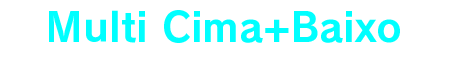
<style>
.page{position:relative;width:450px;height:60px;background:#ffffff}
.page>*{position:absolute;margin:0}
.t1{font:40px "RodinPro-B";color:#00ffff}
</style>
<div class="page">
<p class="t1" style="left:49px;top:10px;width:351px;height:33px">Multi Cima+Baixo</p>
</div>
